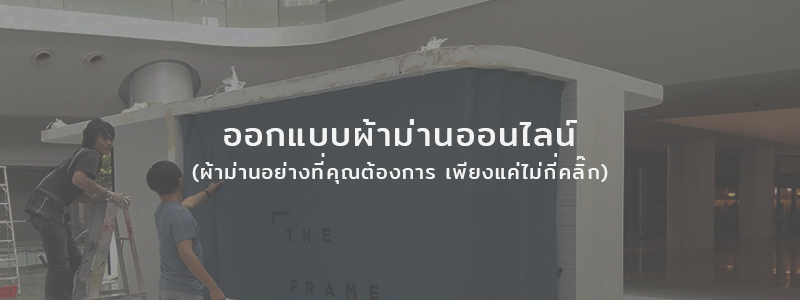
<style>
.page{position:relative;width:800px;height:300px}
.page>*{position:absolute;margin:0}
.t1{font:20px/33.3px "Mitr-Regular";letter-spacing:0.05em;color:#f3f3f3}
.t2{font:33.3px/33.3px "Mitr-Regular";letter-spacing:0.05em;color:#f3f3f3}
.t3{font:20px/33.3px "Mitr-Regular";letter-spacing:0.03em;color:#f3f3f3}
</style>
<div class="page">
<p class="t1" style="left:192px;top:119px;width:416px;height:65px;text-align:center"><span class="t2">ออกแบบผ้าม่านออนไลน์<br></span>(ผ้าม่านอย่างที่คุณต้องการ เพียงแค่ไม่กี<span class="t3">่</span>คลิ๊ก)</p>
</div>
